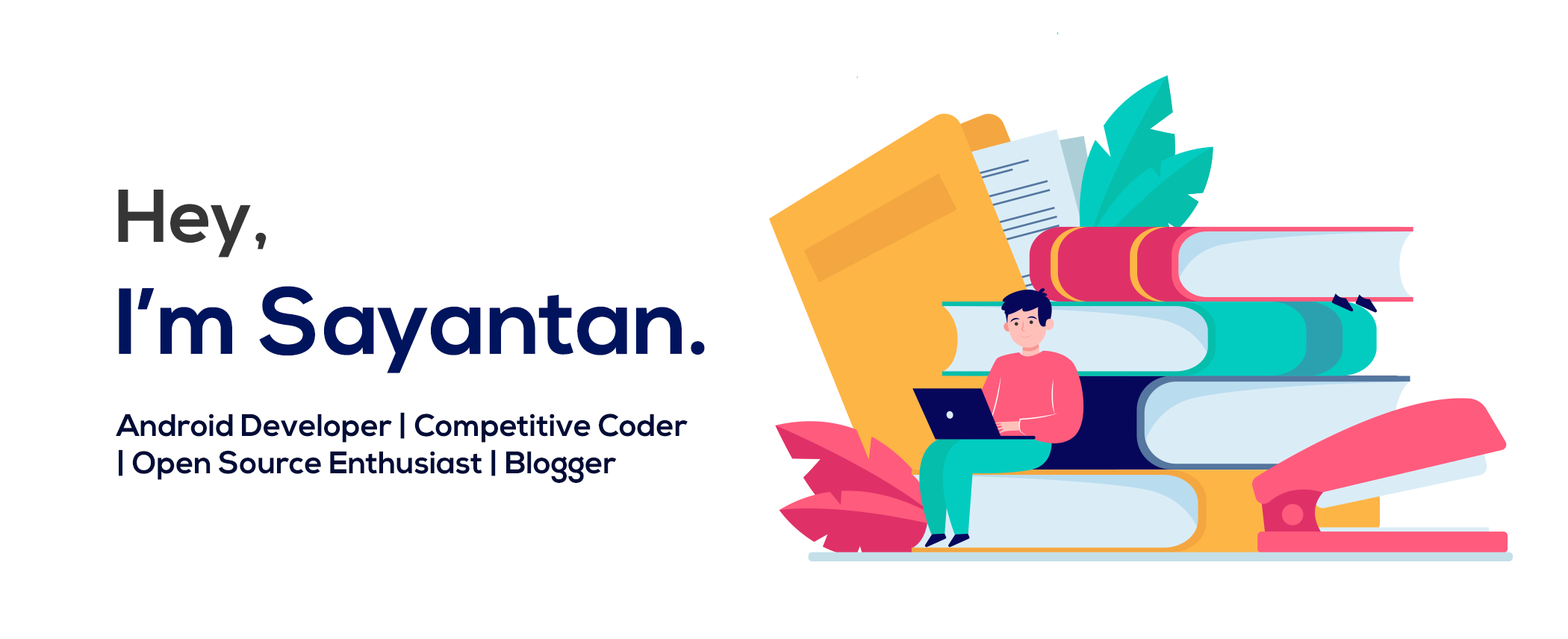
<style>
.page{position:relative;width:1568px;height:639px;background:#ffffff}
.page>*{position:absolute;margin:0}
.t1{font:74.7px "NexaBold";color:#363636}
.t2{font:93.3px "NexaBold";color:#00145e}
.t3{font:31.1px "NexaBold";color:#010c37}
</style>
<div class="page">
<p class="t1" style="left:118px;top:190px;width:149px;height:68px">Hey,</p>
<p class="t2" style="left:119px;top:286px;width:586px;height:87px">I’m Sayantan.</p>
<p class="t3" style="left:116px;top:412px;width:572px;height:71px">Android Developer | Competitive Coder<br>| Open Source Enthusiast | Blogger</p>
</div>
